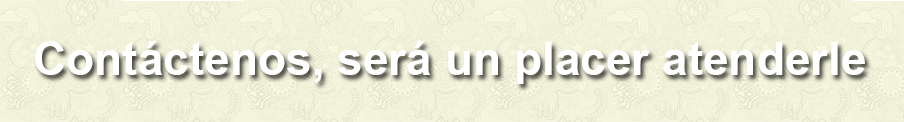
<style>
.page{position:relative;width:904px;height:122px}
.page>*{position:absolute;margin:0}
.t1{font:46px "Arial-BoldMT";color:#ffffff}
</style>
<div class="page">
<p class="t1" style="left:35px;top:41px;width:830px;height:43px">Contáctenos, será un placer atenderle</p>
</div>
